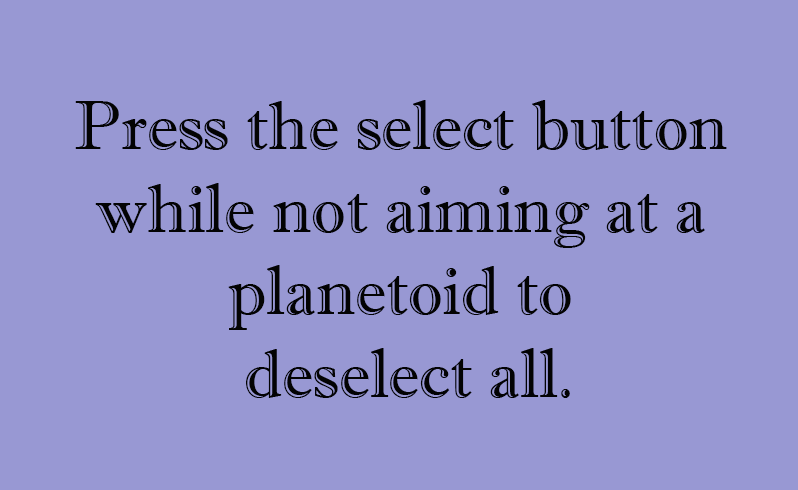
<style>
.page{position:relative;width:798px;height:490px;background:#9898d3}
.page>*{position:absolute;margin:0}
.t1{font:68.7px "ImprintMT-Shadow";color:#030303}
</style>
<div class="page">
<p class="t1" style="left:75px;top:100px;width:652px;height:298px;text-align:center">Press the select button <br>while not aiming at a <br>planetoid to <br>deselect all.</p>
</div>
